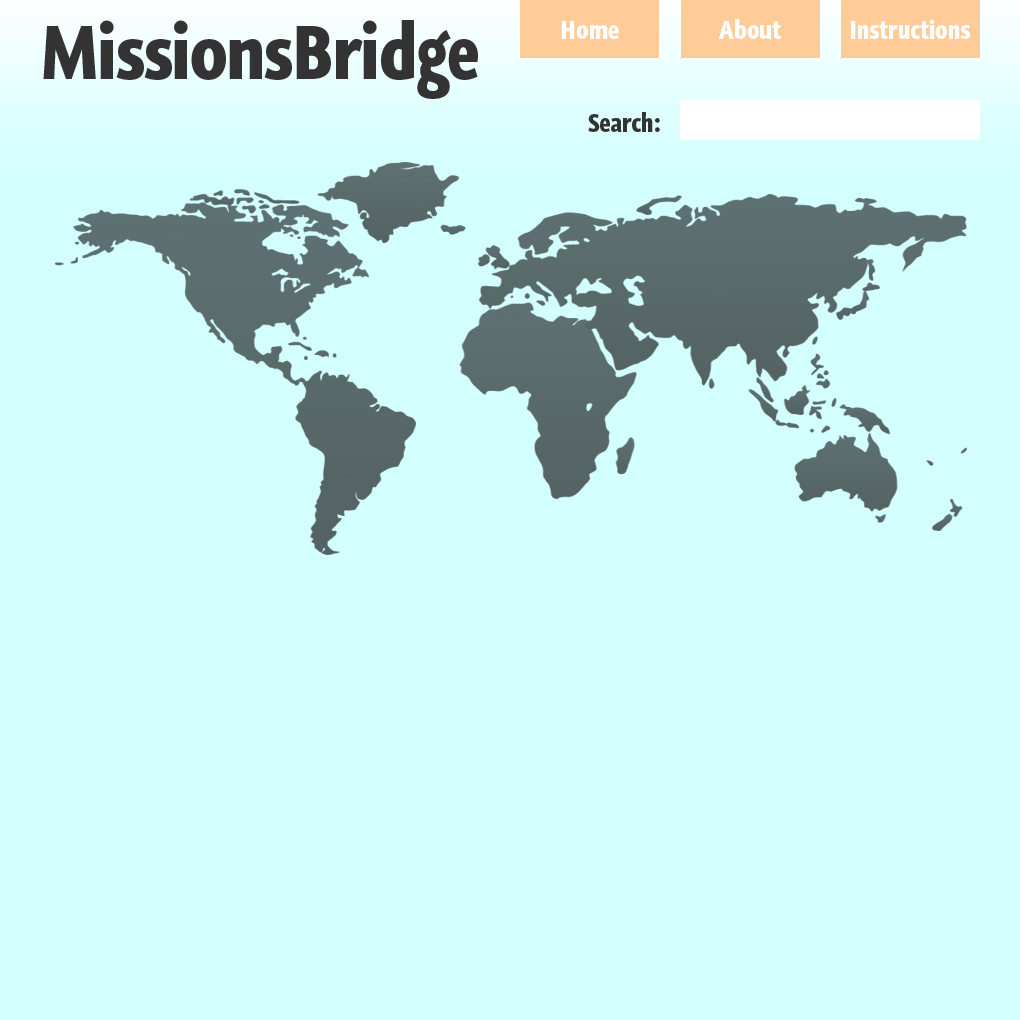
<style>
.page{position:relative;width:1020px;height:1020px;background:#d3ffff}
.page>*{position:absolute;margin:0}
.t1{font:72px "GraublauWeb-Bold";color:#333333}
.t2{font:24px "GraublauWeb-Bold";color:#ffffff}
.t3{font:24px "GraublauWeb-Bold";color:#333333}
</style>
<div class="page">
<p class="t1" style="left:43px;top:20px;width:435px;height:79px">MissionsBridge</p>
<p class="t2" style="left:561px;top:21px;width:58px;height:18px">Home</p>
<p class="t2" style="left:718px;top:19px;width:63px;height:20px">About</p>
<p class="t2" style="left:851px;top:19px;width:119px;height:20px">Instructions</p>
<p class="t3" style="left:588px;top:112px;width:72px;height:20px">Search:</p>
</div>
